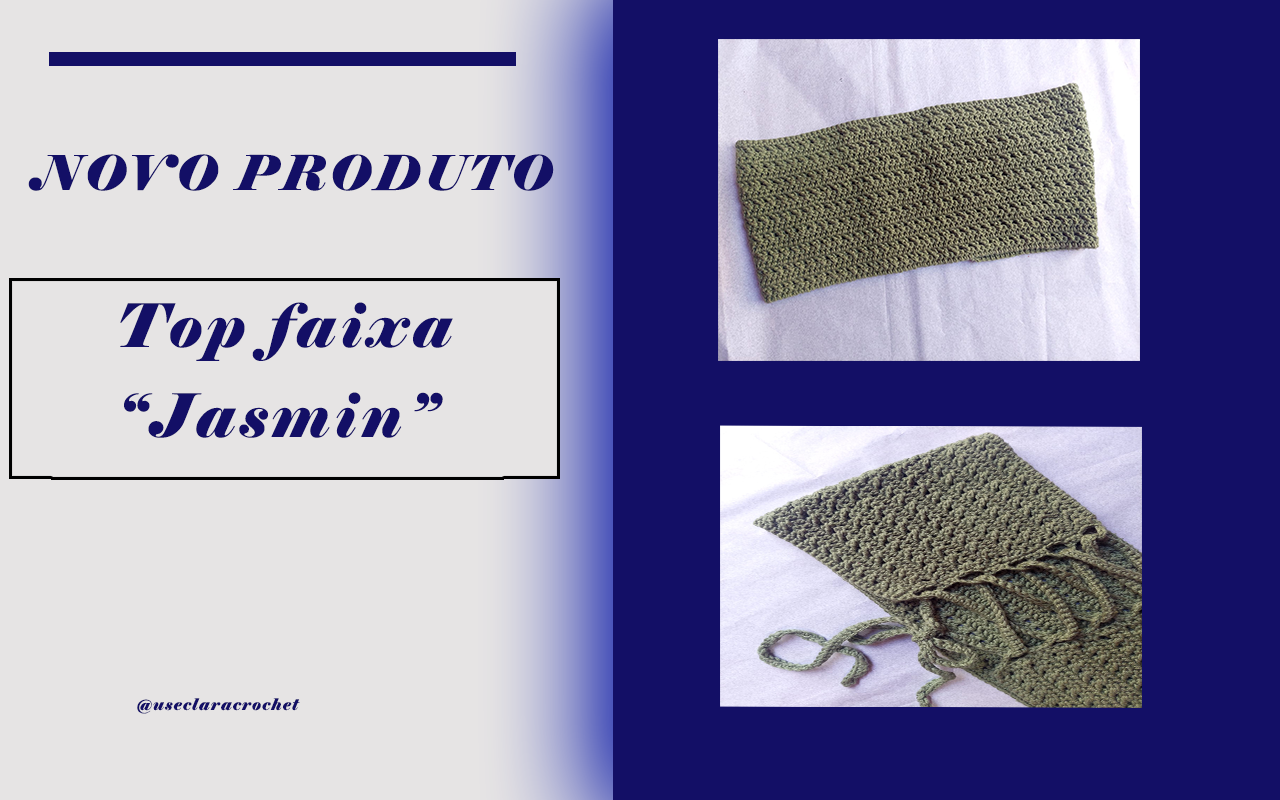
<style>
.page{position:relative;width:1280px;height:800px;background:#e6e4e4}
.page>*{position:absolute;margin:0}
.t1{font:48px "Elephant-Italic";letter-spacing:0.08em;color:#130f66}
.t2{font:60px "Elephant-Italic";letter-spacing:0.08em;color:#130f66}
.t3{font:16px "Elephant-Italic";letter-spacing:0.08em;color:#130f66}
</style>
<div class="page">
<p class="t1" style="left:28px;top:154px;width:526px;height:37px">NOVO PRODUTO</p>
<p class="t2" style="left:120px;top:302px;width:333px;height:59px">Top faixa</p>
<p class="t2" style="left:124px;top:392px;width:319px;height:46px">“Jasmin”</p>
<p class="t3" style="left:137px;top:698px;width:163px;height:16px">@useclaracrochet</p>
</div>
